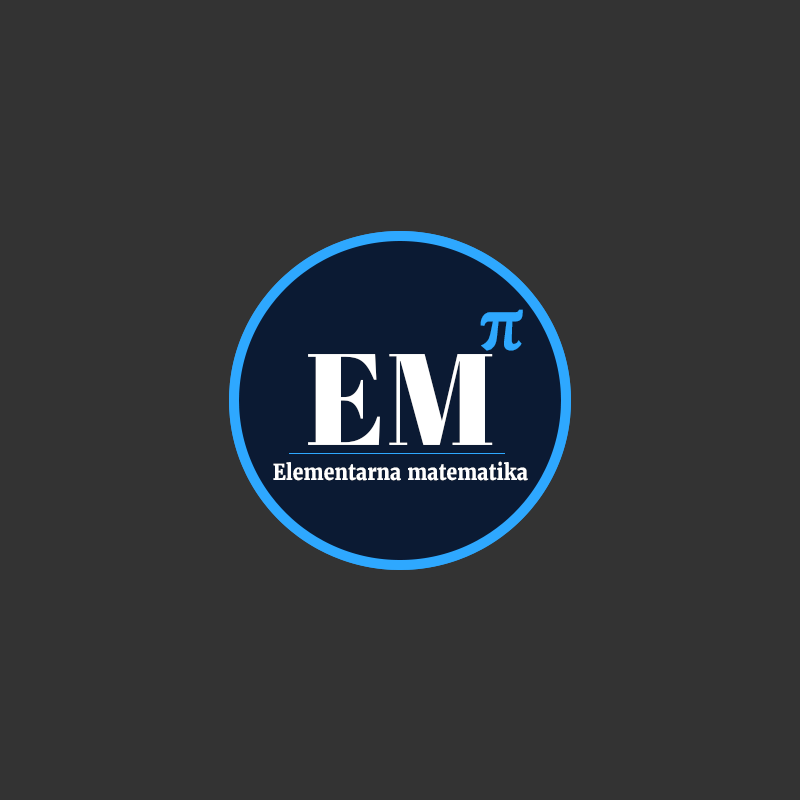
<style>
.page{position:relative;width:800px;height:800px;background:#333333}
.page>*{position:absolute;margin:0}
.t1{font:68.1px "MerriweatherUltraBold";color:#2ea8ff;scale:0.95 1}
.t2{font:130px "AbrilFatface-Regular";color:#ffffff}
.t3{font:22px "MerriweatherUltraBold";color:#ffffff;scale:0.88 1}
</style>
<div class="page">
<p class="t1" style="left:480px;top:309px;width:43px;height:42px">π</p>
<p class="t2" style="left:308px;top:354px;width:185px;height:91px">EM</p>
<p class="t3" style="left:273px;top:461px;width:255px;height:20px">Elementarna matematika</p>
</div>
